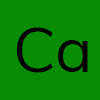
<style>
.page{position:relative;width:100px;height:100px;background:#078c03}
.page>*{position:absolute;margin:0}
.t1{font:62.5px "Muli-Regular";color:#000000}
</style>
<div class="page">
<p class="t1" style="left:16px;top:27px;width:72px;height:46px">Ca</p>
</div>
